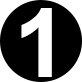
<style>
.page{position:relative;width:82px;height:82px;background:#000000}
.page>*{position:absolute;margin:0}
.t1{font:95.8px "Arial-BoldMT";color:#ffffff}
</style>
<div class="page">
<p class="t1" style="left:21px;top:8px;width:31px;height:69px">1</p>
</div>
